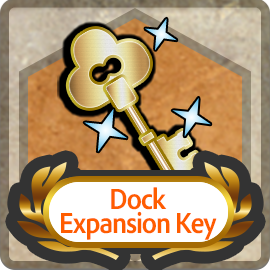
<style>
.page{position:relative;width:270px;height:270px}
.page>*{position:absolute;margin:0}
.t1{font:30px/24px "AdobeClean-Bold";letter-spacing:-0.04em;color:#ff5d00;scale:0.9 1}
</style>
<div class="page">
<p class="t1" style="left:61px;top:187px;width:156px;height:53px;text-align:center">Dock<br>Expansion Key</p>
</div>
